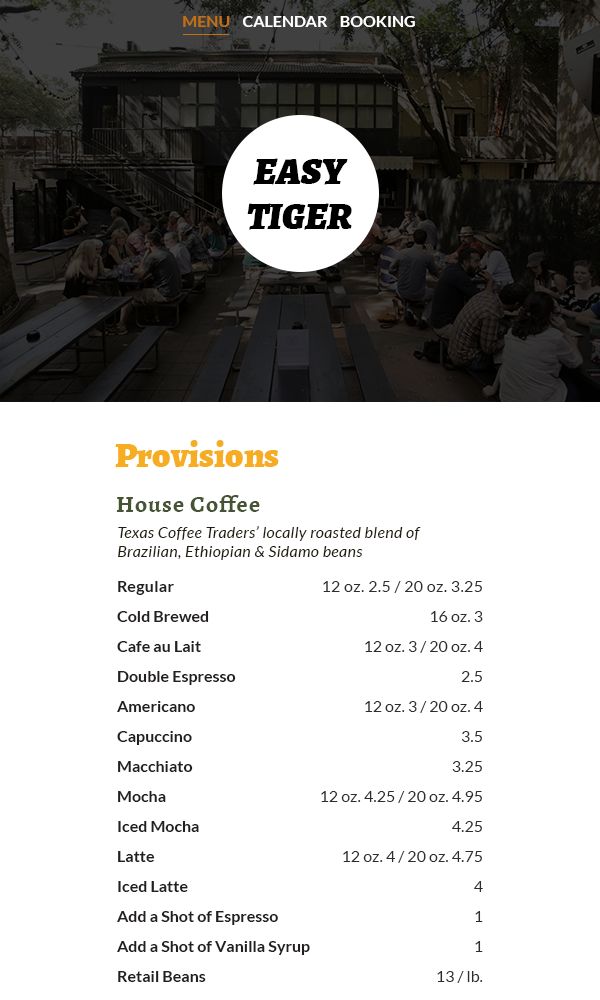
<style>
.page{position:relative;width:600px;height:1000px;background:#ffffff}
.page>*{position:absolute;margin:0}
.t1{font:16px "Lato-Bold";color:#ffffff}
.t2{font:16px "Lato-Bold";color:#c37012}
.t3{font:37.7px "Alegreya-BlackItalic";color:#000000}
.t4{font:36px "Alegreya-Black";color:#f6ad22}
.t5{font:24px "Alegreya-Bold";letter-spacing:0.04em;color:#465434}
.t6{font:16px "Lato-Italic";letter-spacing:0.02em;color:#211c0c}
.t7{font:16px "Lato-Italic";letter-spacing:-0.1em;color:#211c0c}
.t8{font:16px "Lato-Italic";letter-spacing:0.009em;color:#211c0c}
.t9{font:16px "Lato-Italic";letter-spacing:0.013em;color:#211c0c}
.t10{font:16px "Lato-Italic";letter-spacing:0.019em;color:#211c0c}
.t11{font:16px "Lato-Italic";letter-spacing:0.03em;color:#211c0c}
.t12{font:16px "Lato-Italic";letter-spacing:0.005em;color:#211c0c}
.t13{font:16px "Lato-Italic";letter-spacing:0.011em;color:#211c0c}
.t14{font:16px "Lato-Italic";letter-spacing:0.01em;color:#211c0c}
.t15{font:16px "Lato-Italic";letter-spacing:0.029em;color:#211c0c}
.t16{font:16px "Lato-Italic";color:#211c0c}
.t17{font:16px/30px "Lato-Bold";color:#231f20}
.t18{font:16px/30px "Lato-Bold";letter-spacing:-0.014em;color:#231f20}
.t19{font:16px/30px "Lato-Bold";letter-spacing:0.02em;color:#231f20}
.t20{font:16px/30px "Lato-Regular";color:#2e2c2c}
.t21{font:16px/30px "Lato-Regular";letter-spacing:0.02em;color:#2e2c2c}
</style>
<div class="page">
<p class="t1" style="left:183px;top:16px;width:232px;height:11px"><span class="t2">MENU</span>    CALENDAR    BOOKING</p>
<p class="t3" style="left:247px;top:158px;width:105px;height:72px;text-align:center">EASY<br>TIGER</p>
<p class="t4" style="left:115px;top:440px;width:164px;height:28px">Provisions</p>
<p class="t5" style="left:116px;top:495px;width:144px;height:17px">House Coffee</p>
<p class="t6" style="left:118px;top:526px;width:303px;height:34px"><span class="t7">T</span><span class="t8">e</span><span class="t9">x</span>a<span class="t10">s</span> C<span class="t11">o</span>ffee <span class="t7">T</span><span class="t12">r</span><span class="t10">a</span>de<span class="t13">r</span>s’ locally <span class="t12">r</span>oas<span class="t14">t</span>ed blend <span class="t15">o</span><span class="t16">f </span>B<span class="t12">r</span><span class="t10">a</span>zilian, Ethiopi<span class="t10">a</span>n &amp; Sidamo bean<span class="t16">s</span></p>
<p class="t17" style="left:117px;top:581px;width:193px;height:401px"><span class="t18">R</span><span class="t19">egular</span><br>Cold Brewed<br>Cafe au Lait<br>Double Espresso<br>Americano<br>Capuccino<br>Macchiato<br>Mocha<br>Iced Mocha<br>Latte<br>Iced Latte<br>Add a Shot of Espresso<br>Add a Shot of Vanilla Syrup<br>Retail Beans</p>
<p class="t20" style="left:321px;top:581px;width:162px;height:402px;text-align:right"><span class="t21">12 oz. 2.5 / 20 oz. 3.25</span><br>16 oz. 3<br>12 oz. 3 / 20 oz. 4<br>2.5<br>12 oz. 3 / 20 oz. 4<br>3.5<br>3.25<br>12 oz. 4.25 / 20 oz. 4.95<br>4.25<br>12 oz. 4 / 20 oz. 4.75<br>4<br>1<br>1<br>13 / lb.</p>
</div>
